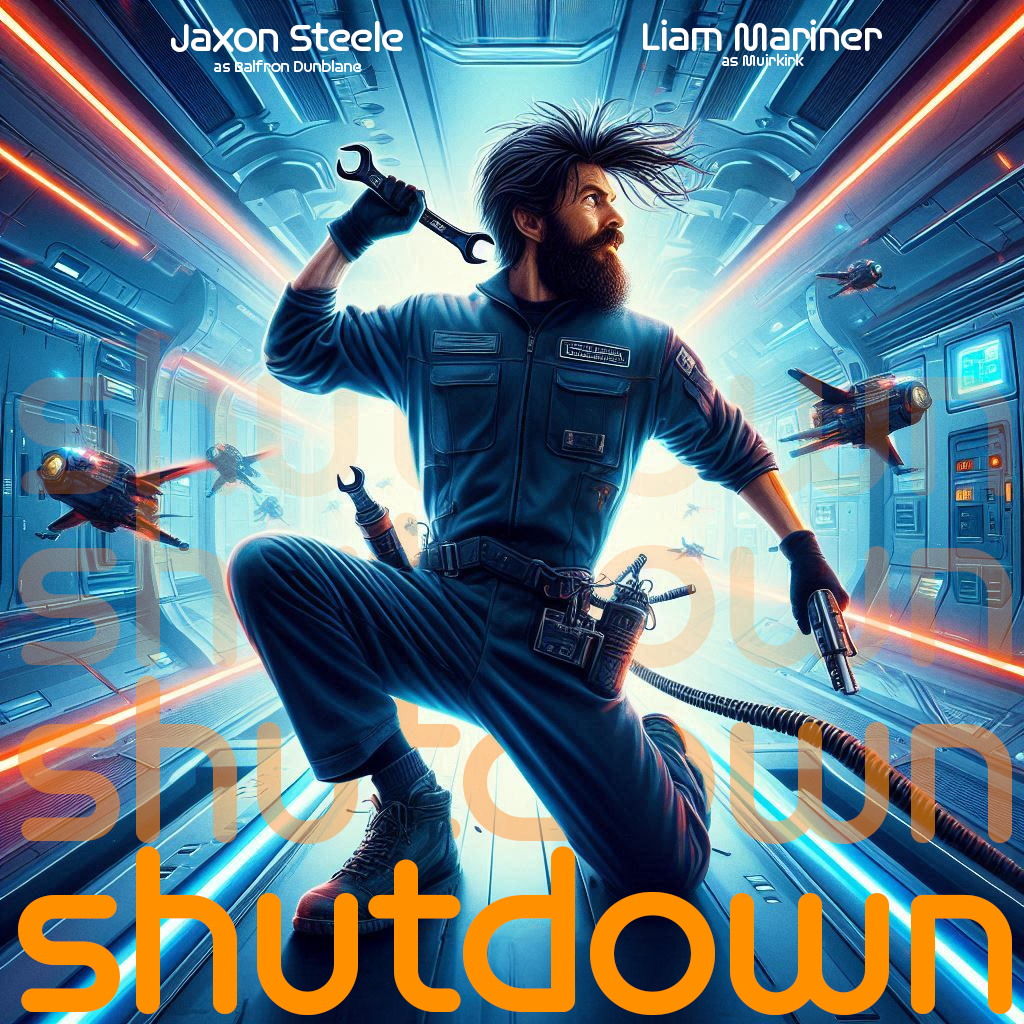
<style>
.page{position:relative;width:1024px;height:1024px}
.page>*{position:absolute;margin:0}
.t1{font:40.8px "Omnium-Bold";color:#ffffff}
.t2{font:16px "Omnium-Bold";color:#ffffff}
.t3{font:221.1px "Omnium-Bold"}
.t4{font:221.1px "Omnium-Bold";color:#ff9000}
</style>
<div class="page">
<p class="t1" style="left:171px;top:21px;width:232px;height:31px">Jaxon Steele</p>
<p class="t1" style="left:643px;top:19px;width:239px;height:32px">Liam Mariner</p>
<p class="t2" style="left:722px;top:53px;width:82px;height:13px">as Muirkirk</p>
<p class="t2" style="left:214px;top:59px;width:147px;height:13px">as Balfron Dunblane</p>
<p class="t3" style="left:18px;top:675px;width:994px;height:169px">shutdown</p>
<p class="t4" style="left:18px;top:846px;width:994px;height:169px">shutdown</p>
</div>
